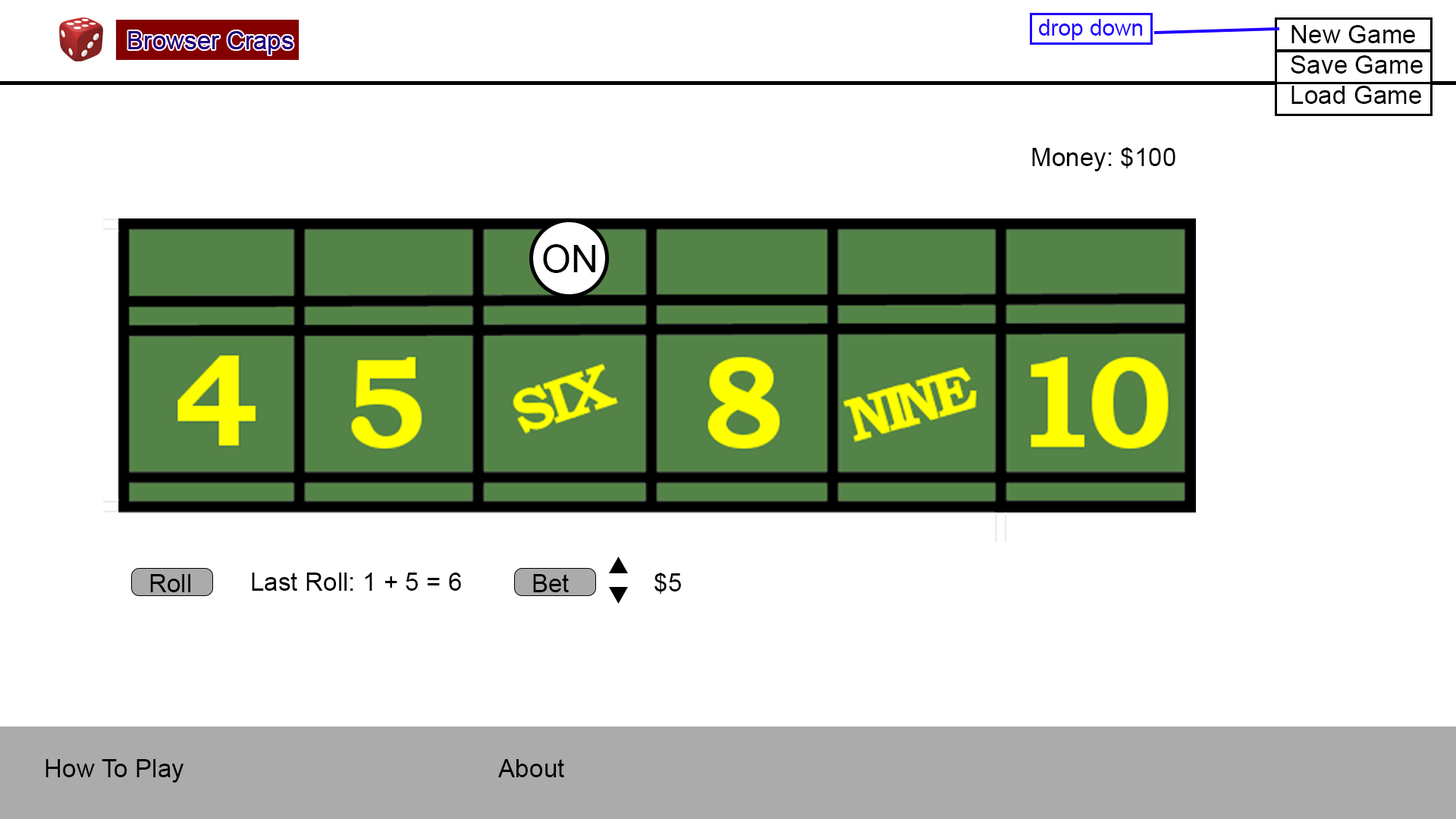
<style>
.page{position:relative;width:1456px;height:819px;background:#ffffff}
.page>*{position:absolute;margin:0}
.t1{font:22.5px "ArialMT";color:#1e00ff}
.t2{font:25.3px "ArialMT";color:#000000}
.t3{font:25.3px "ArialMT";color:#1a0084}
.t4{font:37.9px "ArialMT";color:#000000}
</style>
<div class="page">
<p class="t1" style="left:1039px;top:19px;width:104px;height:21px">drop down</p>
<p class="t2" style="left:1291px;top:25px;width:132px;height:79px">New Game<br>Save Game<br>Load Game</p>
<p class="t3" style="left:128px;top:31px;width:165px;height:24px">Browser Craps</p>
<p class="t2" style="left:1032px;top:147px;width:143px;height:24px">Money: $100</p>
<p class="t4" style="left:543px;top:244px;width:52px;height:29px">ON</p>
<p class="t2" style="left:150px;top:574px;width:40px;height:18px">Roll</p>
<p class="t2" style="left:252px;top:573px;width:209px;height:18px">Last Roll: 1 + 5 = 6</p>
<p class="t2" style="left:533px;top:574px;width:36px;height:18px">Bet</p>
<p class="t2" style="left:654px;top:573px;width:27px;height:21px">$5</p>
<p class="t2" style="left:45px;top:759px;width:139px;height:24px">How To Play</p>
<p class="t2" style="left:498px;top:759px;width:66px;height:18px">About</p>
</div>
